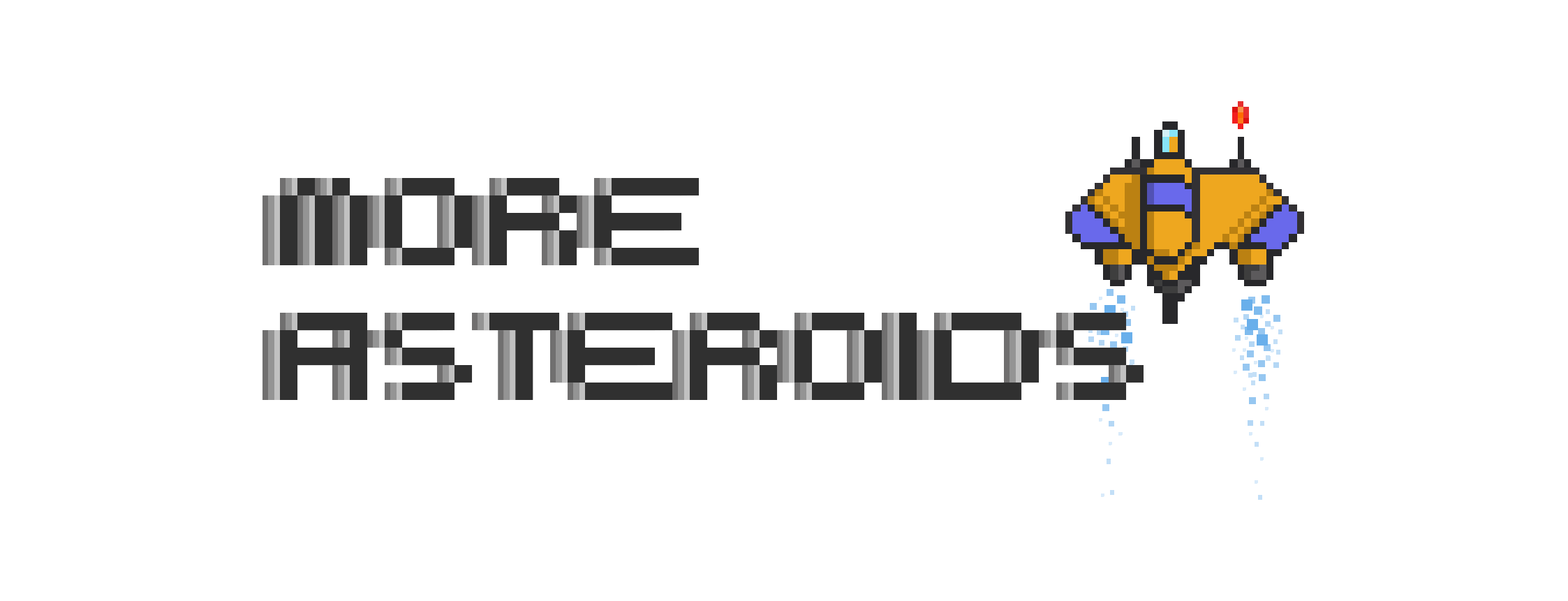
<style>
.page{position:relative;width:1568px;height:601px;background:#ffffff}
.page>*{position:absolute;margin:0}
.t1{font:174.5px/134.7px "BooCity"}
.t2{font:174.5px/134.7px "BooCity";color:#333134}
</style>
<div class="page">
<p class="t1" style="left:262px;top:178px;width:864px;height:222px">MORE<br>ASTEROIDS</p>
<p class="t2" style="left:268px;top:178px;width:864px;height:222px">MORE<br>ASTEROIDS</p>
<p class="t2" style="left:274px;top:178px;width:864px;height:222px">MORE<br>ASTEROIDS</p>
<p class="t2" style="left:280px;top:178px;width:864px;height:222px">MORE<br>ASTEROIDS</p>
</div>
